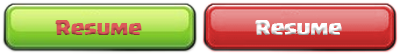
<style>
.page{position:relative;width:400px;height:56px}
.page>*{position:absolute;margin:0}
.t1{font:16px "Supercell-Magic";color:#dc5a5a}
.t2{font:16px "Supercell-Magic";color:#ffffff}
</style>
<div class="page">
<p class="t1" style="left:55px;top:20px;width:87px;height:15px">Resume</p>
<p class="t2" style="left:255px;top:20px;width:87px;height:15px">Resume</p>
</div>
